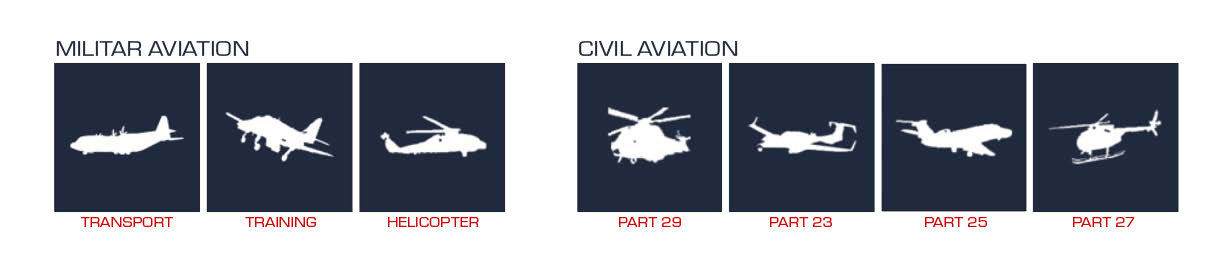
<style>
.page{position:relative;width:1224px;height:255px;background:#ffffff}
.page>*{position:absolute;margin:0}
.t1{font:22px "Eurostile-Reg";color:#21293c;scale:1.16 1}
.t2{font:14.7px "Eurostile-Reg";color:#cd0408;scale:1.16 1}
</style>
<div class="page">
<p class="t1" style="left:56px;top:41px;width:193px;height:15px">MILITAR AVIATION</p>
<p class="t1" style="left:579px;top:41px;width:159px;height:15px">CIVIL AVIATION</p>
<p class="t2" style="left:80px;top:217px;width:94px;height:10px">TRANSPORT</p>
<p class="t2" style="left:245px;top:217px;width:71px;height:10px">TRAINING</p>
<p class="t2" style="left:388px;top:217px;width:91px;height:10px">HELICOPTER</p>
<p class="t2" style="left:619px;top:217px;width:62px;height:10px">PART 29</p>
<p class="t2" style="left:770px;top:217px;width:62px;height:10px">PART 23</p>
<p class="t2" style="left:925px;top:217px;width:62px;height:10px">PART 25</p>
<p class="t2" style="left:1073px;top:217px;width:62px;height:10px">PART 27</p>
</div>
